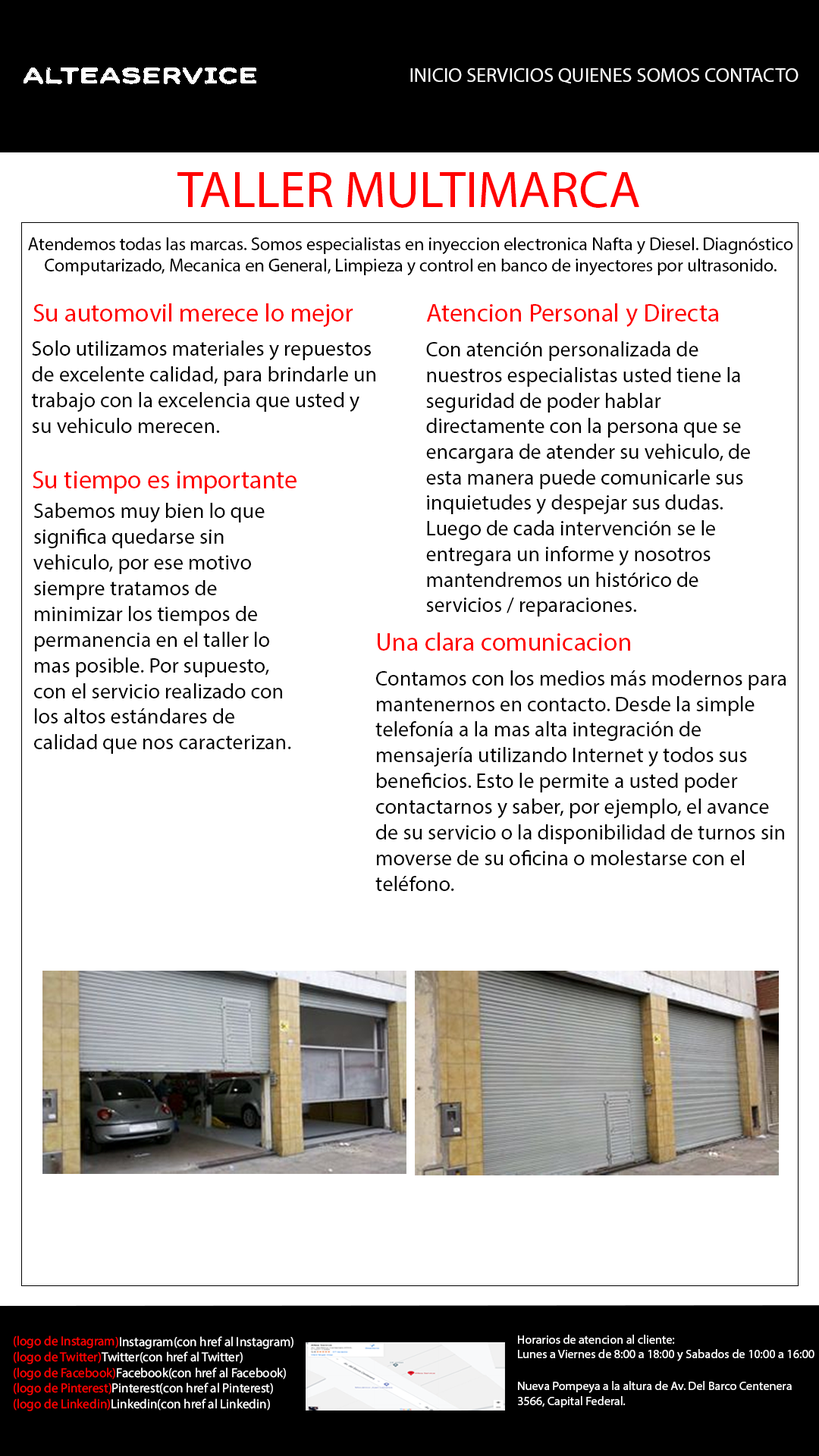
<style>
.page{position:relative;width:819px;height:1456px;background:#ffffff}
.page>*{position:absolute;margin:0}
.t1{font:20.1px "MyriadPro-Regular";color:#ffffff}
.t2{font:51.8px "MyriadPro-Regular";color:#ff0000}
.t3{font:18.2px "MyriadPro-Regular";color:#000000}
.t4{font:25.8px "MyriadPro-Regular";color:#ff0000}
.t5{font:21.5px "MyriadPro-Regular";color:#000000}
.t6{font:21.3px "MyriadPro-Regular";color:#000000}
.t7{font:13px "MyriadPro-Regular";color:#ffffff}
.t8{font:13px "MyriadPro-Regular";color:#ff0000}
.t9{font:12.3px "MyriadPro-Regular";color:#ffffff}
</style>
<div class="page">
<p class="t1" style="left:410px;top:68px;width:389px;height:16px">INICIO SERVICIOS QUIENES SOMOS CONTACTO</p>
<p class="t2" style="left:177px;top:171px;width:462px;height:37px">TALLER MULTIMARCA</p>
<p class="t3" style="left:28px;top:237px;width:765px;height:38px;text-align:center">Atendemos todas las marcas. Somos especialistas en inyeccion electronica Nafta y Diesel. Diagnóstico Computarizado, Mecanica en General, Limpieza y control en banco de inyectores por ultrasonido.</p>
<p class="t4" style="left:33px;top:303px;width:320px;height:24px">Su automovil merece lo mejor</p>
<p class="t4" style="left:426px;top:303px;width:293px;height:24px">Atencion Personal y Directa</p>
<p class="t5" style="left:32px;top:340px;width:343px;height:93px">Solo utilizamos materiales y repuestos de excelente calidad, para brindarle un trabajo con la excelencia que usted y su vehiculo merecen.</p>
<p class="t6" style="left:426px;top:341px;width:324px;height:276px">Con atención personalizada de nuestros especialistas usted tiene la seguridad de poder hablar directamente con la persona que se encargara de atender su vehiculo, de esta manera puede comunicarle sus inquietudes y despejar sus dudas. Luego de cada intervención se le entregara un informe y nosotros mantendremos un histórico de servicios / reparaciones.</p>
<p class="t4" style="left:33px;top:471px;width:264px;height:23px">Su tiempo es importante</p>
<p class="t5" style="left:33px;top:503px;width:258px;height:251px">Sabemos muy bien lo que significa quedarse sin vehiculo, por ese motivo siempre tratamos de minimizar los tiempos de permanencia en el taller lo mas posible. Por supuesto, con el servicio realizado con los altos estándares de calidad que nos caracterizan.</p>
<p class="t4" style="left:378px;top:632px;width:252px;height:19px">Una clara comunicacion</p>
<p class="t5" style="left:375px;top:670px;width:411px;height:221px">Contamos con los medios más modernos para mantenernos en contacto. Desde la simple telefonía a la mas alta integración de mensajería utilizando Internet y todos sus beneficios. Esto le permite a usted poder contactarnos y saber, por ejemplo, el avance de su servicio o la disponibilidad de turnos sin moverse de su oficina o molestarse con el teléfono.</p>
<p class="t7" style="left:14px;top:1335px;width:279px;height:76px"><span class="t8">(logo de Instagram)</span>Instagram(con href al Instagram)<br><span class="t8">(logo de Twitter)</span>Twitter(con href al Twitter)<br><span class="t8">(logo de Facebook)</span>Facebook(con href al Facebook)<br><span class="t8">(logo de Pinterest)</span>Pinterest(con href al Pinterest)<br><span class="t8">(logo de Linkedin)</span>Linkedin(con href al Linkedin)</p>
<p class="t9" style="left:518px;top:1335px;width:296px;height:26px">Horarios de atencion al cliente:<br>Lunes a Viernes de 8:00 a 18:00 y Sabados de 10:00 a 16:00</p>
<p class="t9" style="left:518px;top:1381px;width:274px;height:26px">Nueva Pompeya a la altura de Av. Del Barco Centenera 3566, Capital Federal.</p>
</div>
